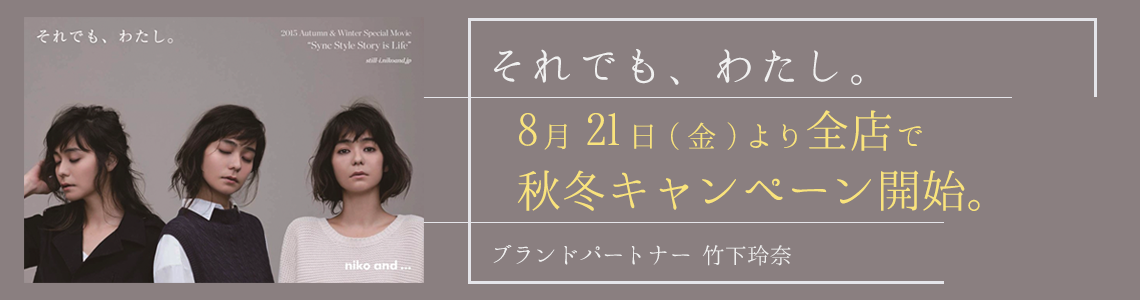
<style>
.page{position:relative;width:1140px;height:300px;background:#8a7f80}
.page>*{position:absolute;margin:0}
.t1{font:45.8px "HannariMincho";letter-spacing:-0.01em;color:#f0f0f0}
.t2{font:50px "HannariMincho";letter-spacing:-0.1em;color:#f9e37c}
.t3{font:33.3px "HannariMincho";letter-spacing:-0.1em;color:#f9e37c}
.t4{font:25px "HannariMincho";letter-spacing:-0.1em;color:#f0f0f0}
</style>
<div class="page">
<p class="t1" style="left:494px;top:49px;width:368px;height:36px">それでも、わたし。</p>
<p class="t2" style="left:517px;top:110px;width:463px;height:101px">8<span class="t3">月</span>21<span class="t3">日(金)より</span>全店<span class="t3">で<br></span>秋冬キャンペーン開始。</p>
<p class="t4" style="left:493px;top:245px;width:298px;height:21px">ブランドパートナー 竹下玲奈</p>
</div>
